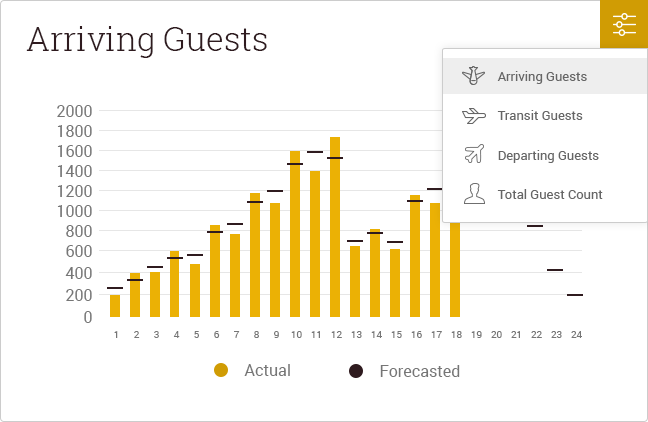
<style>
.page{position:relative;width:648px;height:422px;background:#ffffff}
.page>*{position:absolute;margin:0}
.t1{font:33px "RobotoSlab-Light";color:#2f1b1f}
.t2{font:13px "Roboto-Regular";color:#666666}
.t3{font:16px "Roboto-Regular";color:#767676}
.t4{font:10px "Roboto-Regular";color:#767676}
</style>
<div class="page">
<p class="t1" style="left:26px;top:26px;width:241px;height:32px">Arriving Guests</p>
<p class="t2" style="left:497px;top:71px;width:90px;height:13px">Arriving Guests</p>
<p class="t3" style="left:57px;top:105px;width:35px;height:12px">2000</p>
<p class="t2" style="left:497px;top:110px;width:86px;height:10px">Transit Guests</p>
<p class="t3" style="left:57px;top:125px;width:35px;height:12px">1800</p>
<p class="t3" style="left:57px;top:145px;width:35px;height:12px">1600</p>
<p class="t2" style="left:498px;top:150px;width:101px;height:13px">Departing Guests</p>
<p class="t3" style="left:57px;top:165px;width:35px;height:12px">1400</p>
<p class="t3" style="left:57px;top:185px;width:35px;height:12px">1200</p>
<p class="t2" style="left:497px;top:189px;width:106px;height:10px">Total Guest Count</p>
<p class="t3" style="left:57px;top:205px;width:35px;height:12px">1000</p>
<p class="t3" style="left:66px;top:225px;width:26px;height:12px">800</p>
<p class="t3" style="left:66px;top:245px;width:26px;height:12px">600</p>
<p class="t3" style="left:65px;top:267px;width:27px;height:12px">400</p>
<p class="t3" style="left:66px;top:289px;width:26px;height:12px">200</p>
<p class="t3" style="left:84px;top:311px;width:8px;height:12px">0</p>
<p class="t4" style="left:114px;top:331px;width:4px;height:7px">1</p>
<p class="t4" style="left:134px;top:331px;width:6px;height:7px">2</p>
<p class="t4" style="left:154px;top:331px;width:5px;height:7px">3</p>
<p class="t4" style="left:173px;top:331px;width:7px;height:7px">4</p>
<p class="t4" style="left:194px;top:331px;width:5px;height:7px">5</p>
<p class="t4" style="left:214px;top:331px;width:6px;height:7px">6</p>
<p class="t4" style="left:234px;top:331px;width:6px;height:7px">7</p>
<p class="t4" style="left:254px;top:331px;width:5px;height:7px">8</p>
<p class="t4" style="left:274px;top:331px;width:5px;height:7px">9</p>
<p class="t4" style="left:291px;top:331px;width:11px;height:7px">10</p>
<p class="t4" style="left:311px;top:331px;width:9px;height:7px">11</p>
<p class="t4" style="left:331px;top:331px;width:11px;height:7px">12</p>
<p class="t4" style="left:351px;top:331px;width:11px;height:7px">13</p>
<p class="t4" style="left:371px;top:331px;width:11px;height:7px">14</p>
<p class="t4" style="left:391px;top:331px;width:11px;height:7px">15</p>
<p class="t4" style="left:411px;top:331px;width:11px;height:7px">16</p>
<p class="t4" style="left:431px;top:331px;width:11px;height:7px">17</p>
<p class="t4" style="left:451px;top:331px;width:11px;height:7px">18</p>
<p class="t4" style="left:471px;top:331px;width:11px;height:7px">19</p>
<p class="t4" style="left:491px;top:331px;width:11px;height:7px">20</p>
<p class="t4" style="left:511px;top:331px;width:9px;height:7px">21</p>
<p class="t4" style="left:531px;top:331px;width:11px;height:7px">22</p>
<p class="t4" style="left:551px;top:331px;width:11px;height:7px">23</p>
<p class="t4" style="left:571px;top:331px;width:11px;height:7px">24</p>
<p class="t3" style="left:244px;top:364px;width:46px;height:12px">Actual</p>
<p class="t3" style="left:380px;top:365px;width:80px;height:12px">Forecasted</p>
</div>
